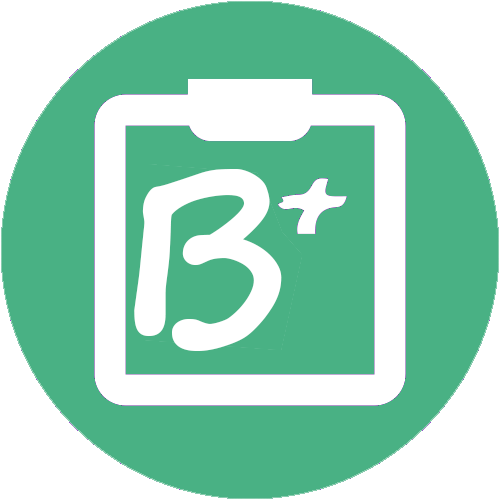
<style>
.page{position:relative;width:500px;height:500px;background:#49b184}
.page>*{position:absolute;margin:0}
.t1{font:233.3px "SegoeScript-Bold";color:#ffffff}
</style>
<div class="page">
<p class="t1" style="left:134px;top:169px;width:148px;height:182px">B</p>
</div>
